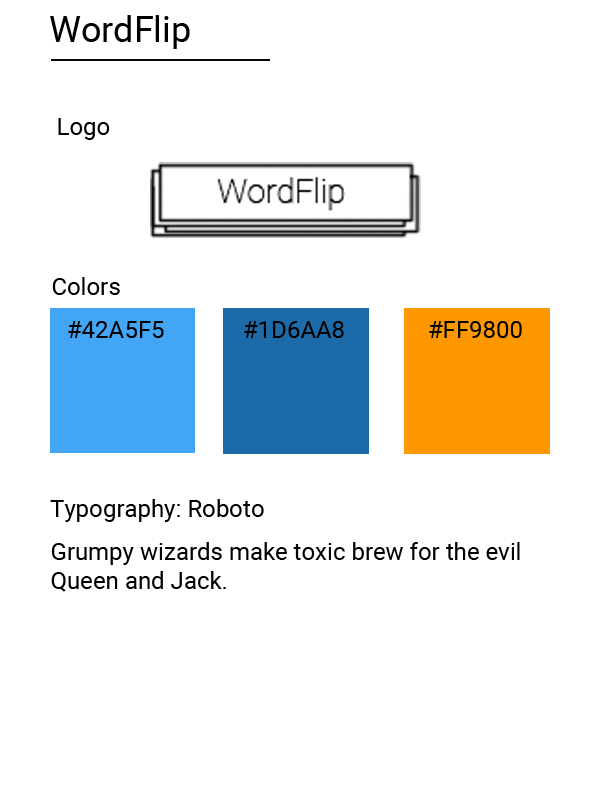
<style>
.page{position:relative;width:600px;height:800px;background:#ffffff}
.page>*{position:absolute;margin:0}
.t1{font:36px "Roboto-Regular";color:#000000}
.t2{font:24px "Roboto-Regular";color:#000000}
</style>
<div class="page">
<p class="t1" style="left:50px;top:15px;width:140px;height:34px">WordFlip</p>
<p class="t2" style="left:58px;top:118px;width:52px;height:22px">Logo</p>
<p class="t2" style="left:52px;top:277px;width:68px;height:18px">Colors</p>
<p class="t2" style="left:68px;top:321px;width:96px;height:17px">#42A5F5</p>
<p class="t2" style="left:244px;top:321px;width:100px;height:17px">#1D6AA8</p>
<p class="t2" style="left:429px;top:321px;width:93px;height:17px">#FF9800</p>
<p class="t2" style="left:50px;top:499px;width:214px;height:23px">Typography: Roboto</p>
<p class="t2" style="left:51px;top:542px;width:469px;height:50px">Grumpy wizards make toxic brew for the evil <br>Queen and Jack.</p>
</div>
